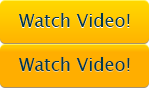
<style>
.page{position:relative;width:149px;height:88px;background:#ffae00}
.page>*{position:absolute;margin:0}
.t1{font:18px "LucidaSansUnicode";color:#01384d}
</style>
<div class="page">
<p class="t1" style="left:19px;top:13px;width:111px;height:14px">Watch Video!</p>
<p class="t1" style="left:19px;top:57px;width:111px;height:14px">Watch Video!</p>
</div>
